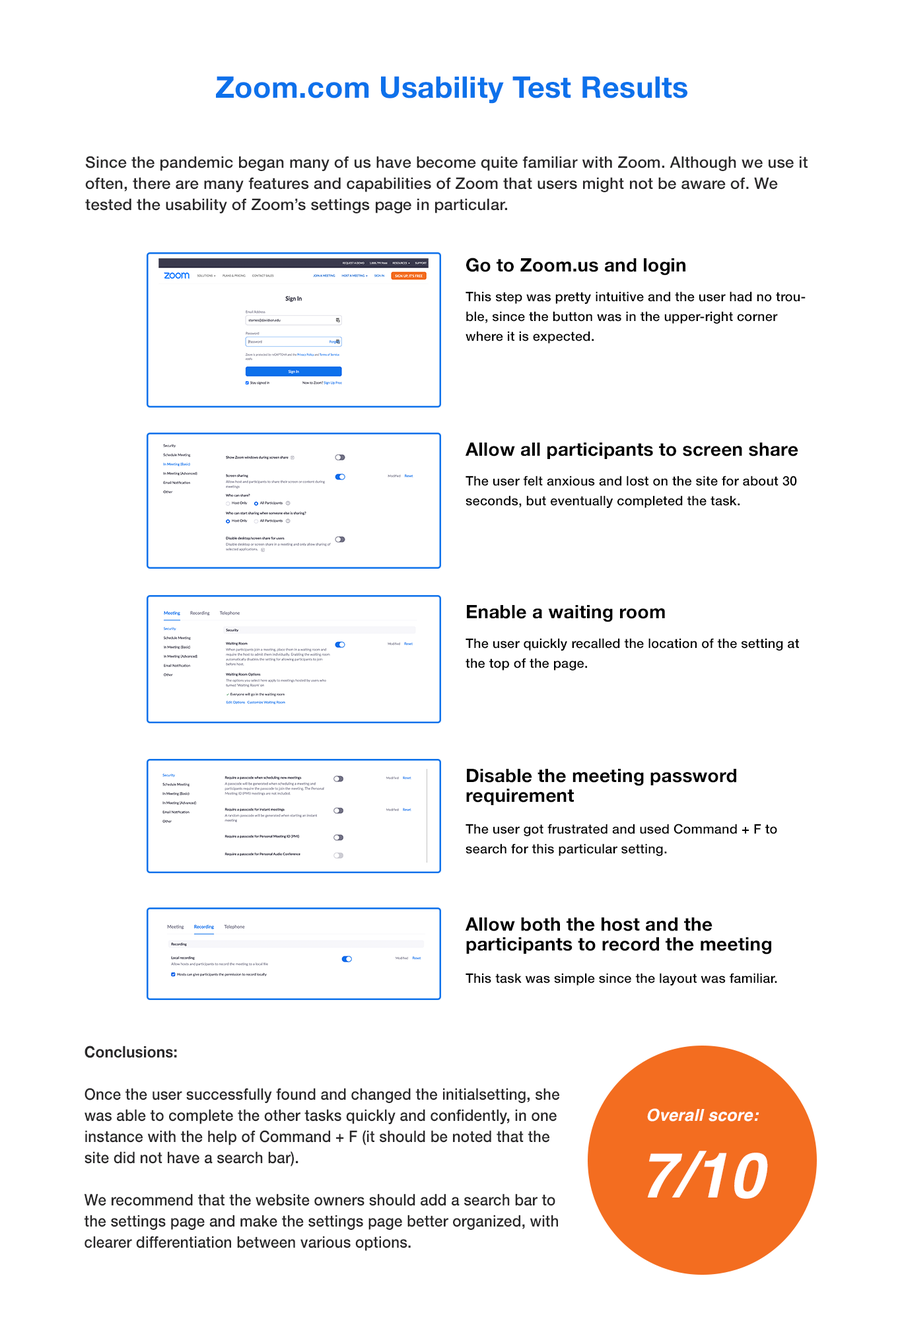
<style>
.page{position:relative;width:902px;height:1321px;background:#ffffff}
.page>*{position:absolute;margin:0}
.t1{font:29.7px "HelveticaNeue-Bold";letter-spacing:0.01em;color:#0d71eb}
.t2{font:15.9px/21.1px "HelveticaNeue-Medium";letter-spacing:0.01em;color:#282728}
.t3{font:18.5px "HelveticaNeue-Bold";letter-spacing:0.01em;color:#000000}
.t4{font:13.2px/19.9px "HelveticaNeue-Medium";letter-spacing:0.01em;color:#000000}
.t5{font:13.2px/19.8px "HelveticaNeue-Medium";letter-spacing:0.01em;color:#000000}
.t6{font:18.5px/19.8px "HelveticaNeue-Bold";letter-spacing:0.01em;color:#000000}
.t7{font:13.2px "HelveticaNeue-Medium";letter-spacing:0.01em;color:#000000}
.t8{font:15.9px/21.1px "HelveticaNeue-Medium";letter-spacing:0.01em;color:#282728;scale:0.93 1}
.t9{font:15.9px/21.1px "HelveticaNeue-Bold";letter-spacing:0.01em;color:#282728;scale:0.93 1}
.t10{font:16.5px/25.6px "Helvetica-BoldOblique";letter-spacing:0.01em;color:#ffffff}
.t11{font:62.8px/25.6px "Helvetica-BoldOblique";letter-spacing:0.01em;color:#ffffff}
</style>
<div class="page">
<p class="t1" style="left:216px;top:76px;width:472px;height:28px">Zoom.com Usability Test Results</p>
<p class="t2" style="left:85px;top:156px;width:723px;height:57px">Since the pandemic began many of us have become quite familiar with Zoom. Although we use it often, there are many features and capabilities of Zoom that users might not be aware of. We tested the usability of Zoom’s settings page in particular.</p>
<p class="t3" style="left:466px;top:258px;width:220px;height:17px">Go to Zoom.us and login</p>
<p class="t4" style="left:466px;top:291px;width:340px;height:53px">This step was pretty intuitive and the user had no trouble, since the button was in the upper-right corner where it is expected.</p>
<p class="t3" style="left:465px;top:443px;width:334px;height:16px">Allow all participants to screen share</p>
<p class="t5" style="left:466px;top:476px;width:331px;height:32px">The user felt anxious and lost on the site for about 30 seconds, but eventually completed the task.</p>
<p class="t3" style="left:467px;top:605px;width:198px;height:17px">Enable a waiting room</p>
<p class="t4" style="left:466px;top:638px;width:333px;height:33px">The user quickly recalled the location of the setting at the top of the page.</p>
<p class="t6" style="left:466px;top:769px;width:271px;height:36px">Disable the meeting password<br>requirement</p>
<p class="t4" style="left:466px;top:824px;width:312px;height:32px">The user got frustrated and used Command + F to search for this particular setting.</p>
<p class="t6" style="left:465px;top:918px;width:307px;height:37px">Allow both the host and the<br>participants to record the meeting</p>
<p class="t7" style="left:466px;top:973px;width:312px;height:13px">This task was simple since the layout was familiar.</p>
<p class="t8" style="left:84px;top:1046px;width:476px;height:205px"><span class="t9">Conclusions: <br><br></span>Once the user successfully found and changed the initialsetting, she was able to complete the other tasks quickly and confidently, in one instance with the help of Command + F (it should be noted that the site did not have a search bar).<br><br>We recommend that the website owners should add a search bar to the settings page and make the settings page better organized, with clearer differentiation between various options.</p>
<p class="t10" style="left:647px;top:1109px;width:121px;height:90px;text-align:center">Overall score:<br><br><br><span class="t11">7/10</span></p>
</div>
